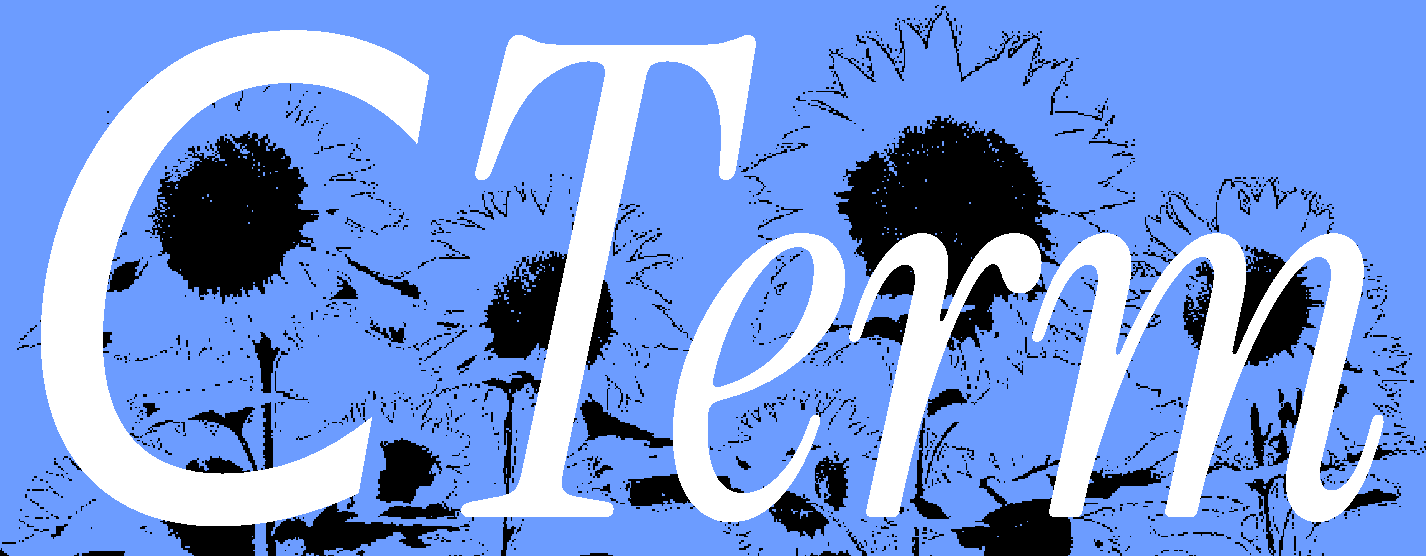
<style>
.page{position:relative;width:1426px;height:556px;background:#6c9cff}
.page>*{position:absolute;margin:0}
.t1{font:550px "InstrumentSerif-Italic";color:#ffffff;scale:0.91 1}
.t2{font:655.8px "DejaVuSans-Oblique";color:#ffffff;scale:0.91 1}
.t3{font:655.8px "InstrumentSerif-Italic";color:#ffffff;scale:0.91 1}
</style>
<div class="page">
<p class="t1" style="left:41px;top:30px;width:1343px;height:496px"><span class="t2">C</span><span class="t3">T</span>erm</p>
</div>
